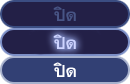
<style>
.page{position:relative;width:130px;height:84px;background:#232047}
.page>*{position:absolute;margin:0}
.t1{font:24px "TFPhethai";color:#485586}
.t2{font:24px "TFPhethai";color:#ced4ff}
.t3{font:24px "TFPhethai";color:#ffffff}
</style>
<div class="page">
<p class="t1" style="left:53px;top:6px;width:23px;height:15px">ปิด</p>
<p class="t2" style="left:53px;top:34px;width:23px;height:15px">ปิด</p>
<p class="t3" style="left:53px;top:62px;width:23px;height:15px">ปิด</p>
</div>
